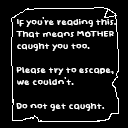
<style>
.page{position:relative;width:128px;height:128px;background:#000000}
.page>*{position:absolute;margin:0}
.t1{font:10px "Baby-Doll";color:#ffffff}
</style>
<div class="page">
<p class="t1" style="left:16px;top:17px;width:100px;height:94px">If you’re reading this.<br>That means MOTHER<br>caught you too.<br><br>Please try to escape,<br>we couldn’t.<br><br>Do not get caught.</p>
</div>
